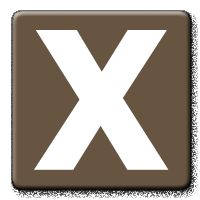
<style>
.page{position:relative;width:200px;height:200px;background:#675541}
.page>*{position:absolute;margin:0}
.t1{font:191.7px "Tahoma-Bold";letter-spacing:-0.1em;color:#ffffff}
</style>
<div class="page">
<p class="t1" style="left:34px;top:30px;width:135px;height:140px">X</p>
</div>
